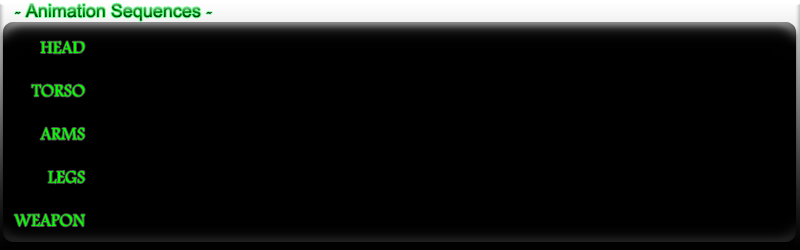
<style>
.page{position:relative;width:800px;height:250px;background:#000000}
.page>*{position:absolute;margin:0}
.t1{font:18px "ArialMT"}
.t2{font:18px "FootlightMTLight"}
.t3{font:18px "FootlightMTLight";color:#06ff00}
</style>
<div class="page">
<p class="t1" style="left:15px;top:3px;width:197px;height:18px"><span class="t2">- </span>Animation Sequences<span class="t2"> -</span></p>
<p class="t3" style="left:14px;top:41px;width:71px;height:186px;text-align:right">HEAD<br><br>TORSO<br><br>ARMS<br><br>LEGS<br><br>WEAPON</p>
</div>
